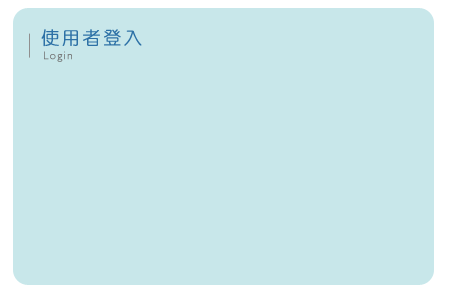
<style>
.page{position:relative;width:450px;height:300px;background:#c8e7ea}
.page>*{position:absolute;margin:0}
.t1{font:18px "DFYuan-Lt-HK-BF";letter-spacing:0.12em;color:#2d71a6;font-weight:bold}
.t2{font:11px "Humanist521BT-Light";letter-spacing:0.12em;color:#707070;font-weight:bold}
</style>
<div class="page">
<p class="t1" style="left:41px;top:29px;width:101px;height:18px">使用者登入</p>
<p class="t2" style="left:44px;top:51px;width:28px;height:11px">Login</p>
</div>
